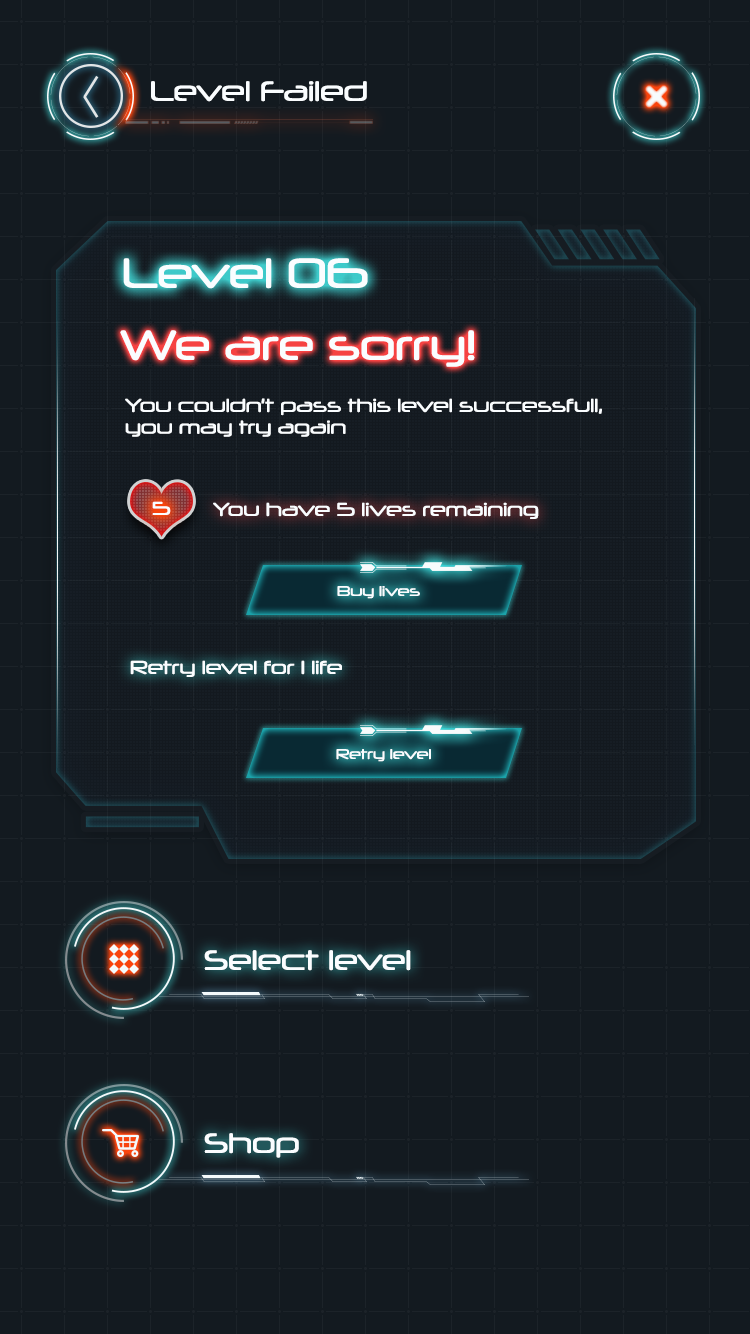
<style>
.page{position:relative;width:750px;height:1334px;background:#131a20}
.page>*{position:absolute;margin:0}
.t1{font:27.2px "Neuropol-Regular";color:#fafdff}
.t2{font:40.8px "Neuropol-Regular";color:#fafdff}
.t3{font:18.1px "Neuropol-Regular";color:#fafdff}
.t4{font:13.6px "Neuropol-Regular";color:#fafdff}
</style>
<div class="page">
<p class="t1" style="left:151px;top:81px;width:216px;height:21px">Level Failed</p>
<p class="t2" style="left:123px;top:258px;width:245px;height:31px">Level 06</p>
<p class="t2" style="left:120px;top:330px;width:355px;height:37px">We are sorry!</p>
<p class="t3" style="left:125px;top:398px;width:477px;height:39px">You couldn’t pass this level successfull, <br>you may try again</p>
<p class="t3" style="left:152px;top:501px;width:19px;height:14px">5</p>
<p class="t3" style="left:213px;top:502px;width:326px;height:17px">You have 5 lives remaining</p>
<p class="t4" style="left:337px;top:586px;width:83px;height:13px">Buy lives</p>
<p class="t3" style="left:130px;top:660px;width:212px;height:17px">Retry level for 1 life</p>
<p class="t4" style="left:336px;top:749px;width:95px;height:13px">Retry level</p>
<p class="t1" style="left:204px;top:950px;width:207px;height:21px">Select level</p>
<p class="t1" style="left:204px;top:1133px;width:95px;height:25px">Shop</p>
</div>
